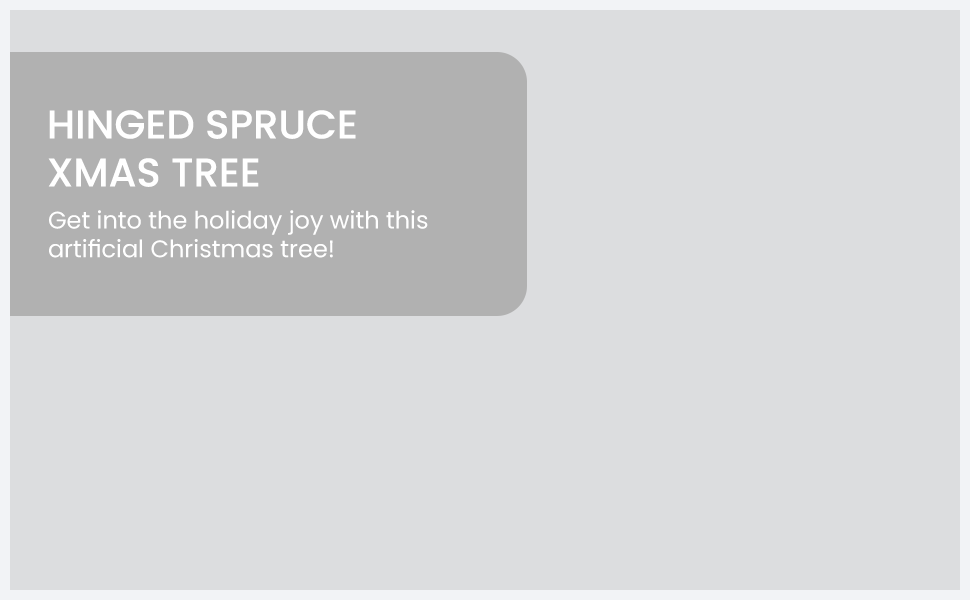
<style>
.page{position:relative;width:970px;height:600px;background:#dcdddf}
.page>*{position:absolute;margin:0}
.t1{font:40px "Poppins-Medium";color:#ffffff}
.t2{font:24px "Poppins-Regular";color:#ffffff}
</style>
<div class="page">
<p class="t1" style="left:48px;top:110px;width:308px;height:77px">HINGED SPRUCE<br>XMAS TREE</p>
<p class="t2" style="left:49px;top:210px;width:379px;height:48px">Get into the holiday joy with this<br>artificial Christmas tree!</p>
</div>
